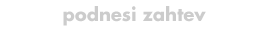
<style>
.page{position:relative;width:270px;height:42px;background:#ffffff}
.page>*{position:absolute;margin:0}
.t1{font:18px "FuturaCom-Bold";color:#cccccc}
</style>
<div class="page">
<p class="t1" style="left:63px;top:6px;width:143px;height:20px">podnesi zahtev</p>
</div>
